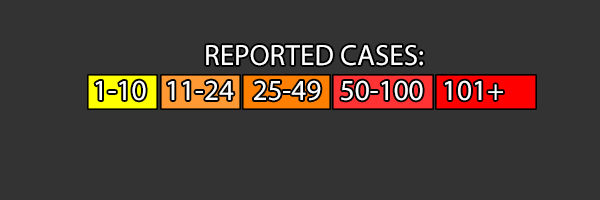
<style>
.page{position:relative;width:600px;height:200px;background:#333333}
.page>*{position:absolute;margin:0}
.t1{font:29.2px "MyriadPro-Regular";color:#ffffff}
</style>
<div class="page">
<p class="t1" style="left:95px;top:45px;width:408px;height:56px;text-align:center">REPORTED CASES:<br>1-10   11-24   25-49   50-100   101+</p>
</div>
